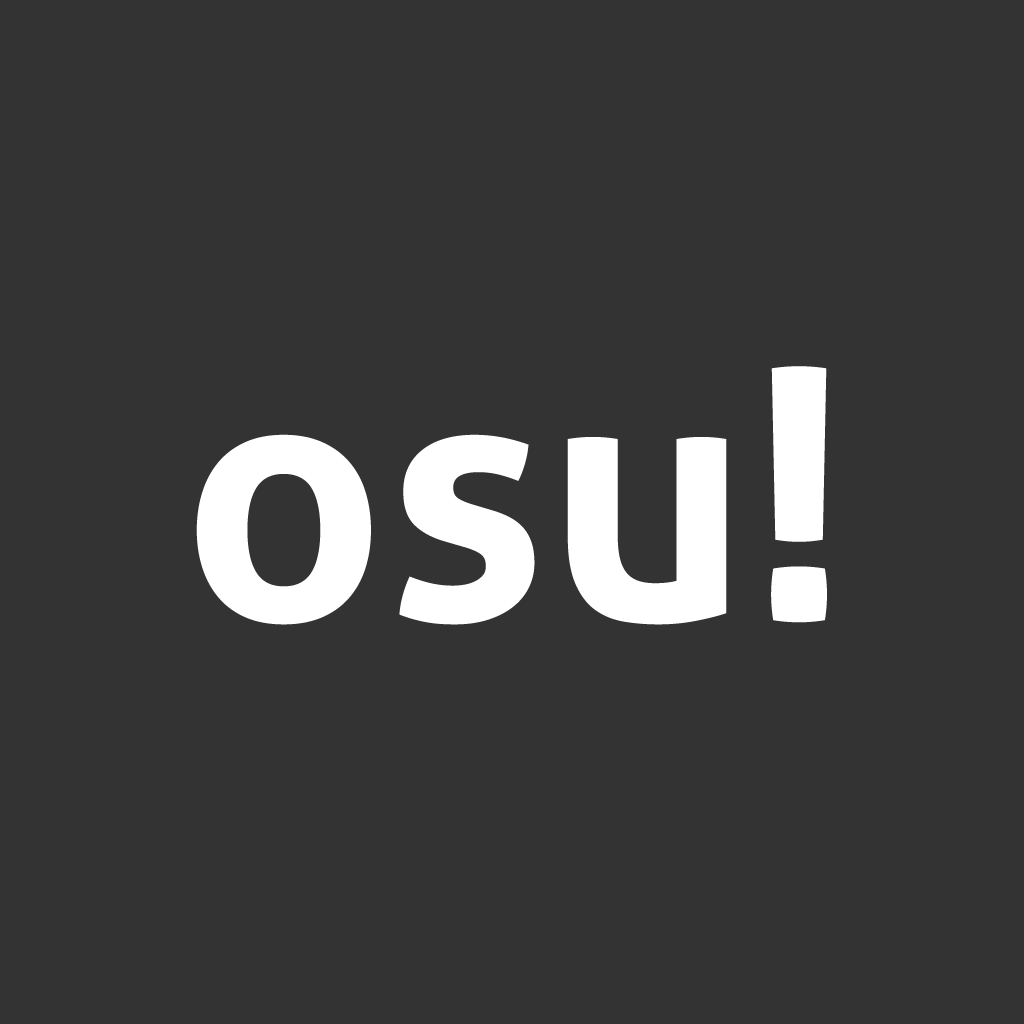
<style>
.page{position:relative;width:1024px;height:1024px;background:#333333}
.page>*{position:absolute;margin:0}
.t1{font:350px "Aller-Bold";color:#ffffff}
</style>
<div class="page">
<p class="t1" style="left:196px;top:366px;width:631px;height:259px">osu!</p>
</div>
